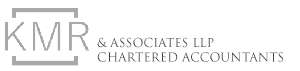
<style>
.page{position:relative;width:300px;height:71px;background:#ffffff}
.page>*{position:absolute;margin:0}
.t1{font:12px "TrajanPro-Regular";color:#424141}
</style>
<div class="page">
<p class="t1" style="left:97px;top:37px;width:186px;height:25px">&amp; ASSOCIATES LLP<br>CHARTERED ACCOUNTANTS</p>
</div>
